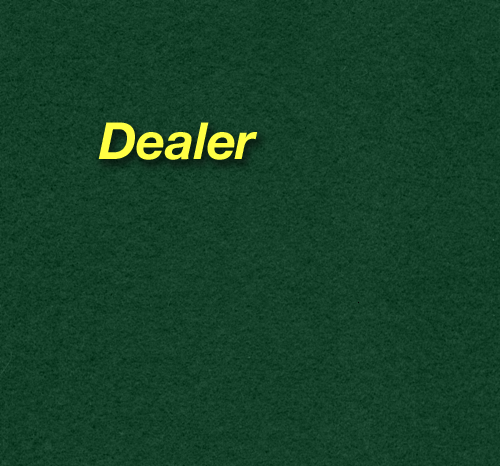
<style>
.page{position:relative;width:500px;height:466px}
.page>*{position:absolute;margin:0}
.t1{font:51px "HelveticaNeue-BoldItalic";letter-spacing:-0.01em;color:#fefe44}
</style>
<div class="page">
<p class="t1" style="left:98px;top:122px;width:160px;height:38px">Dealer</p>
</div>
